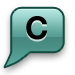
<style>
.page{position:relative;width:75px;height:75px;background:#ffffff}
.page>*{position:absolute;margin:0}
.t1{font:31.3px "HelveticaNeue-Bold";color:#000000}
</style>
<div class="page">
<p class="t1" style="left:26px;top:16px;width:22px;height:24px">C</p>
</div>
